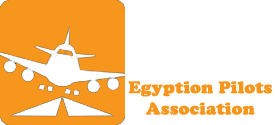
<style>
.page{position:relative;width:275px;height:125px;background:#ffffff}
.page>*{position:absolute;margin:0}
.t1{font:17.6px "CooperBlack";color:#f6961d;font-weight:bold}
</style>
<div class="page">
<p class="t1" style="left:128px;top:81px;width:144px;height:34px;text-align:center">Egyption Pilots<br>Association</p>
</div>
